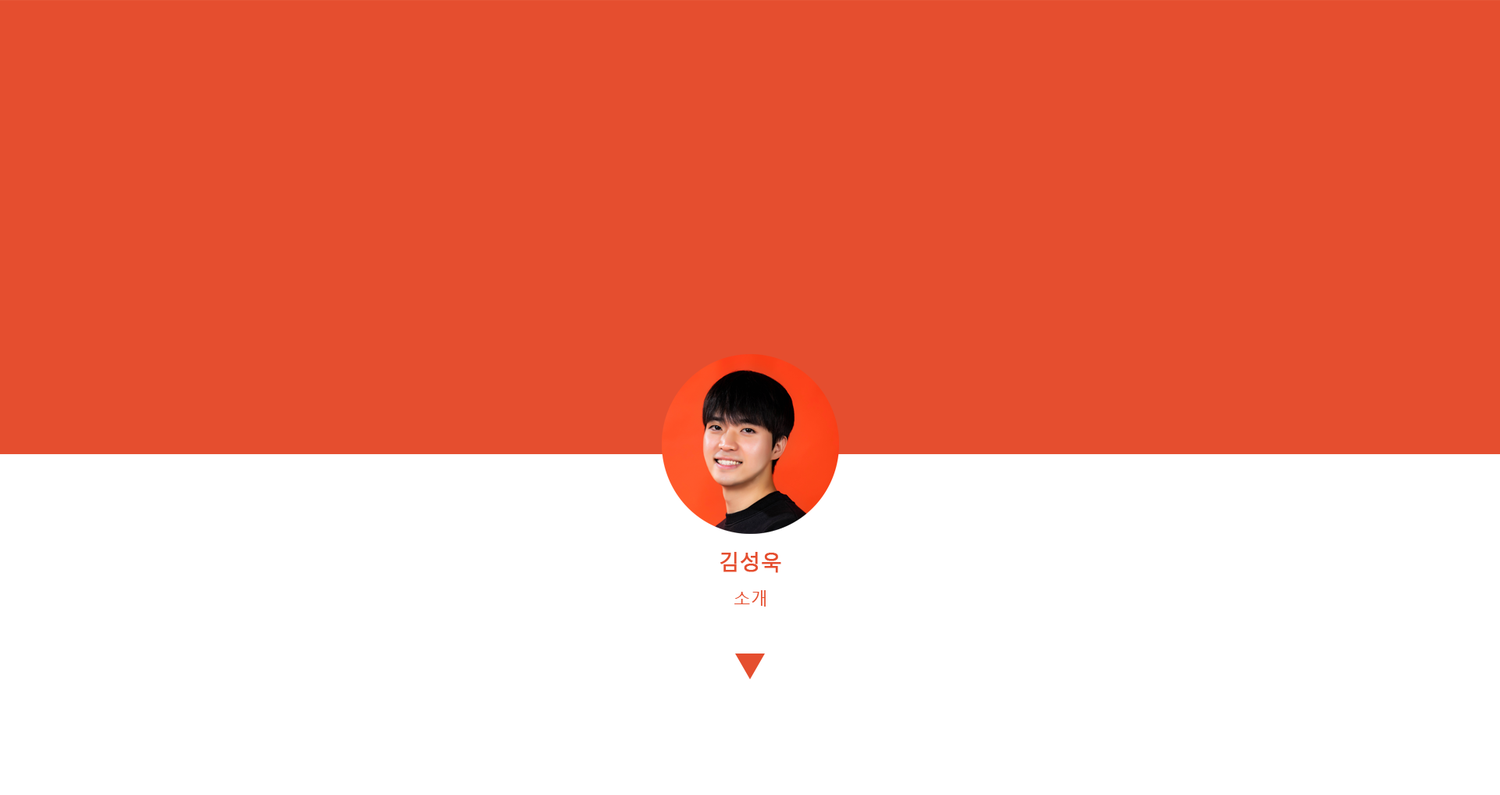
<style>
.page{position:relative;width:1500px;height:795px;background:#e54e2f}
.page>*{position:absolute;margin:0}
.t1{font:20.8px "MalgunGothic";color:#e54e2f;font-weight:bold}
.t2{font:17.4px "MalgunGothic";color:#e54e2f}
</style>
<div class="page">
<p class="t1" style="left:721px;top:552px;width:60px;height:21px">김성욱</p>
<p class="t2" style="left:735px;top:590px;width:31px;height:16px">소개</p>
</div>
